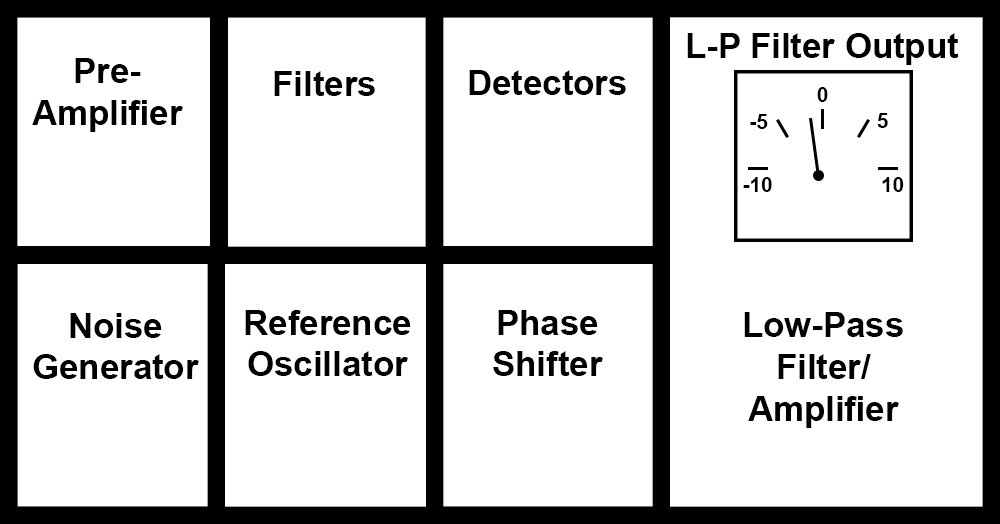
<style>
.page{position:relative;width:1000px;height:524px;background:#ffffff}
.page>*{position:absolute;margin:0}
.t1{font:34.7px "Arial-BoldMT";color:#000000}
.t2{font:20.8px "Arial-BoldMT";color:#000000}
</style>
<div class="page">
<p class="t1" style="left:687px;top:33px;width:272px;height:32px">L-P Filter Output</p>
<p class="t1" style="left:32px;top:58px;width:151px;height:74px;text-align:center">Pre-<br>Amplifier</p>
<p class="t1" style="left:274px;top:71px;width:101px;height:25px">Filters</p>
<p class="t1" style="left:469px;top:70px;width:157px;height:25px">Detectors</p>
<p class="t2" style="left:817px;top:87px;width:11px;height:15px">0</p>
<p class="t2" style="left:877px;top:113px;width:11px;height:15px">5</p>
<p class="t2" style="left:750px;top:114px;width:18px;height:15px">-5</p>
<p class="t2" style="left:743px;top:177px;width:29px;height:15px">-10</p>
<p class="t2" style="left:882px;top:177px;width:22px;height:15px">10</p>
<p class="t1" style="left:33px;top:313px;width:166px;height:66px;text-align:center">Noise<br>Generator</p>
<p class="t1" style="left:245px;top:310px;width:166px;height:66px;text-align:center">Reference<br>Oscillator</p>
<p class="t1" style="left:493px;top:310px;width:110px;height:66px;text-align:center">Phase<br>Shifter</p>
<p class="t1" style="left:744px;top:312px;width:159px;height:116px;text-align:center">Low-Pass<br>Filter/<br>Amplifier</p>
</div>
